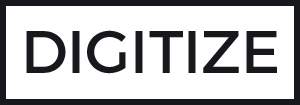
<style>
.page{position:relative;width:300px;height:105px;background:#ffffff}
.page>*{position:absolute;margin:0}
.t1{font:60px "Montserrat-Regular";color:#16181c;text-transform:uppercase}
</style>
<div class="page">
<p class="t1" style="left:26px;top:30px;width:251px;height:44px">DIGITIZE</p>
</div>
